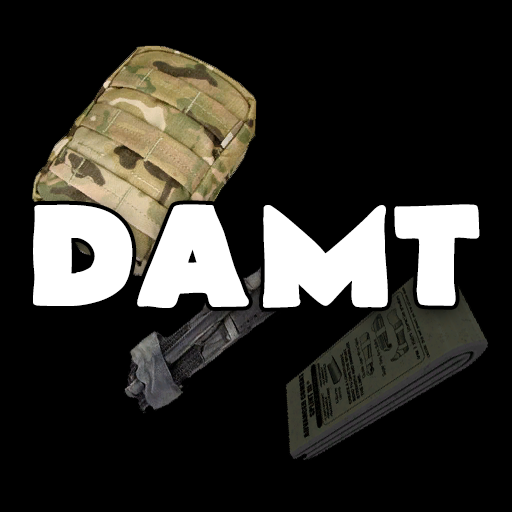
<style>
.page{position:relative;width:512px;height:512px;background:#000000}
.page>*{position:absolute;margin:0}
.t1{font:139px "FlatBread";color:#ffffff;text-transform:uppercase;font-weight:bold}
</style>
<div class="page">
<p class="t1" style="left:33px;top:204px;width:447px;height:104px">DAMT</p>
</div>
